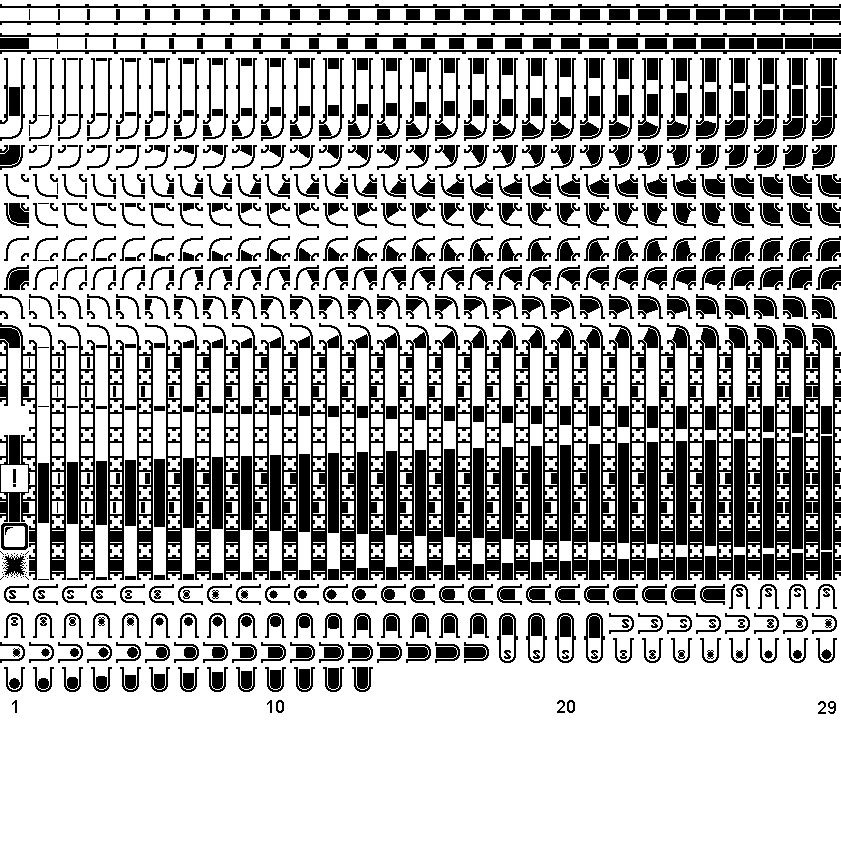
<style>
.page{position:relative;width:841px;height:841px;background:#ffffff}
.page>*{position:absolute;margin:0}
.t1{font:18px "ArialMT";color:#000000}
</style>
<div class="page">
<p class="t1" style="left:12px;top:700px;width:5px;height:13px">1</p>
<p class="t1" style="left:267px;top:700px;width:17px;height:13px">10</p>
<p class="t1" style="left:557px;top:700px;width:18px;height:13px">20</p>
<p class="t1" style="left:818px;top:701px;width:18px;height:13px">29</p>
</div>
